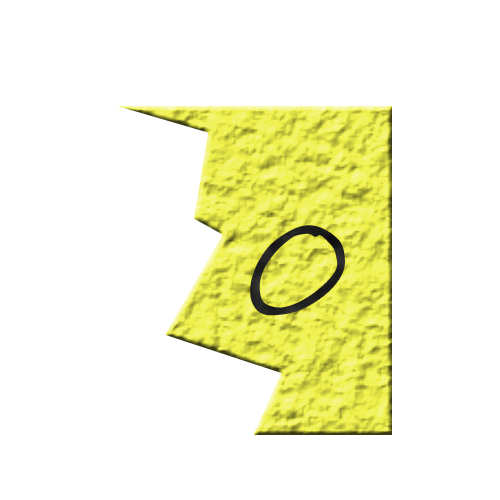
<style>
.page{position:relative;width:500px;height:500px;background:#ffffff}
.page>*{position:absolute;margin:0}
.t1{font:140px "SegoeScript"}
</style>
<div class="page">
<p class="t1" style="left:248px;top:223px;width:99px;height:95px">0</p>
</div>
